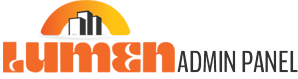
<style>
.page{position:relative;width:298px;height:79px;background:#ffffff}
.page>*{position:absolute;margin:0}
.t1{font:30px "BenchNine-Regular";color:#333333}
</style>
<div class="page">
<p class="t1" style="left:177px;top:50px;width:121px;height:23px">ADMIN PANEL</p>
</div>
